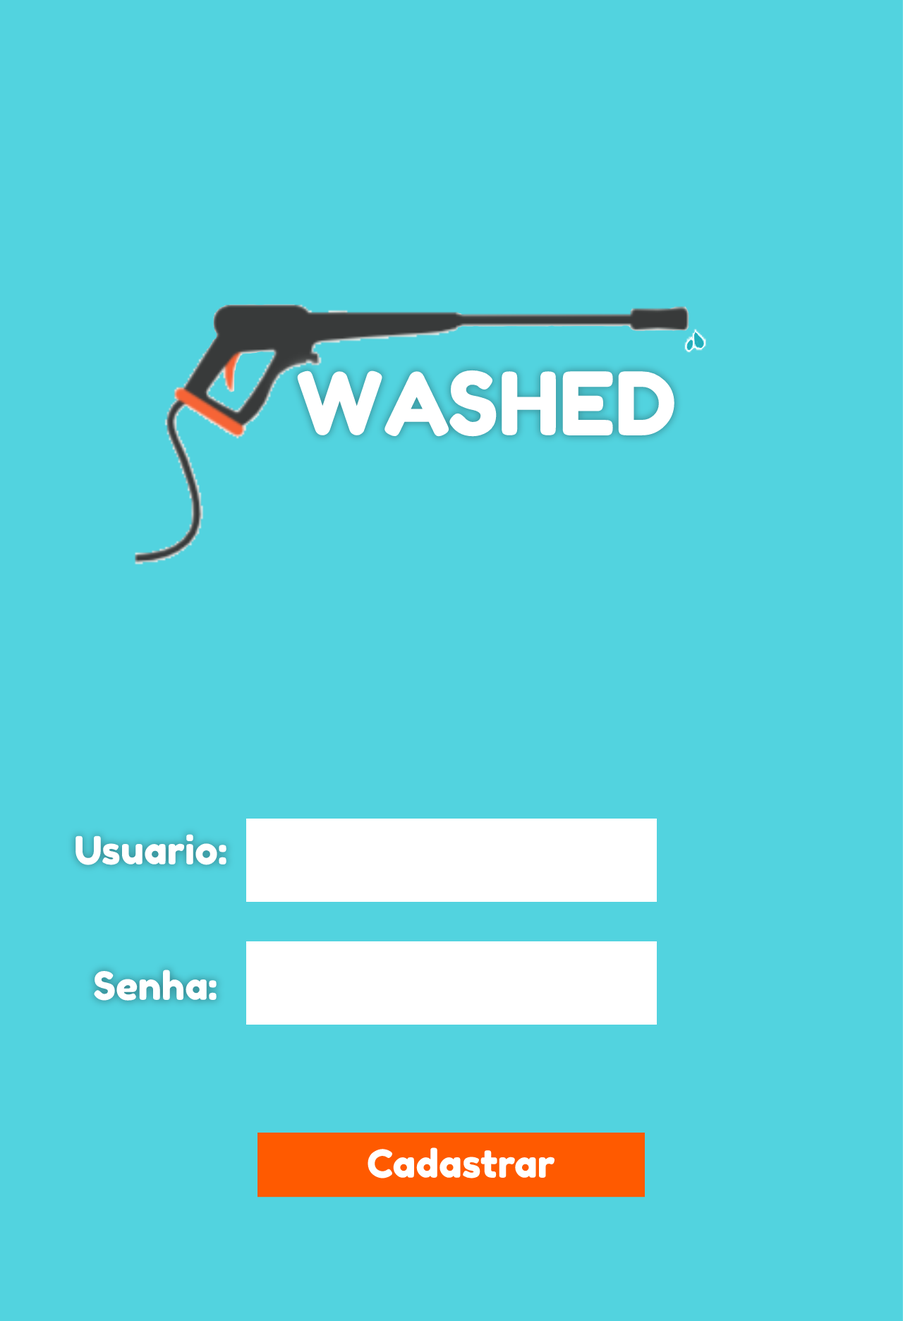
<style>
.page{position:relative;width:903px;height:1321px;background:#52d3df}
.page>*{position:absolute;margin:0}
.t1{font:87.3px "FredokaOne-Regular";color:#ffffff}
.t2{font:80.5px "FredokaOne-Regular";color:#ffffff}
.t3{font:38.8px "FredokaOne-Regular";color:#ffffff}
</style>
<div class="page">
<p class="t1" style="left:297px;top:370px;width:377px;height:67px"><span class="t2">  </span>WASHED</p>
<p class="t3" style="left:75px;top:834px;width:151px;height:31px">Usuario:</p>
<p class="t3" style="left:94px;top:969px;width:123px;height:31px">Senha:</p>
<p class="t3" style="left:368px;top:1147px;width:187px;height:31px">Cadastrar</p>
</div>
